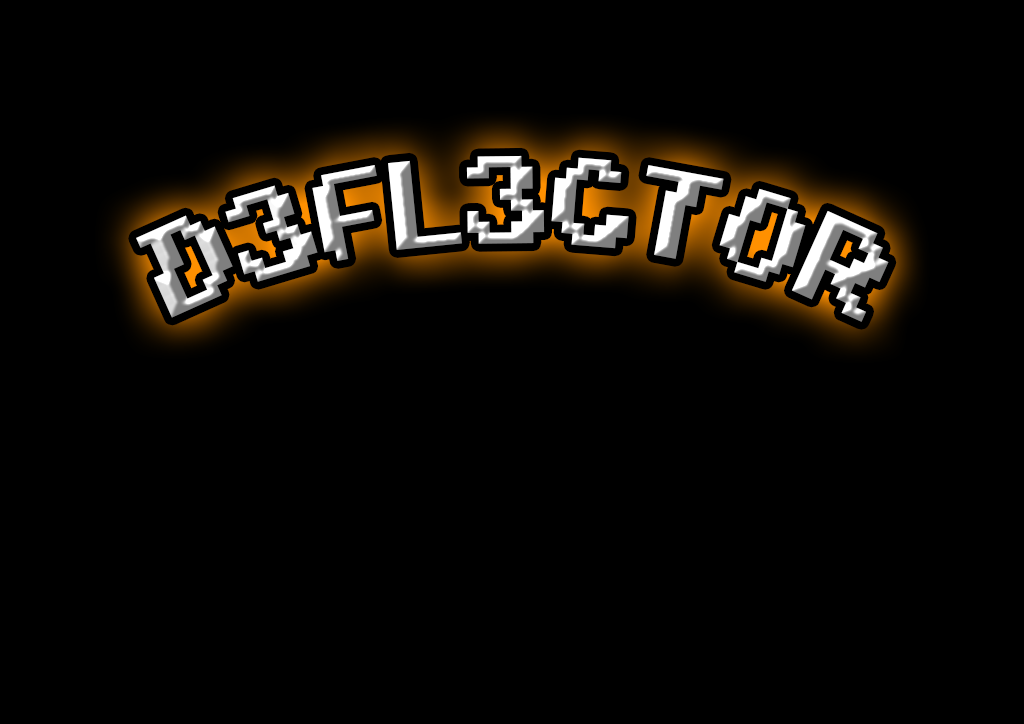
<style>
.page{position:relative;width:1024px;height:724px;background:#000000}
.page>*{position:absolute;margin:0}
.t1{font:131.3px "YosterIslandReg";letter-spacing:-0.04em}
</style>
<div class="page">
<p class="t1" style="left:136px;top:155px;width:753px;height:167px">D3FL3CT0R</p>
</div>
